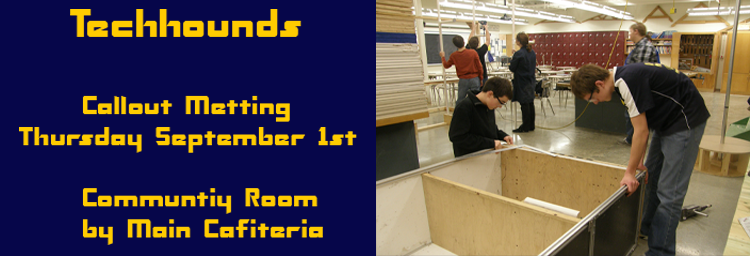
<style>
.page{position:relative;width:750px;height:256px;background:#06064a}
.page>*{position:absolute;margin:0}
.t1{font:25.6px "TransformersNormal";color:#ffcc00}
.t2{font:38.4px "TransformersNormal";color:#ffcc00}
</style>
<div class="page">
<p class="t1" style="left:19px;top:9px;width:338px;height:236px"><span class="t2">Techhounds<br><br></span>     Callout Metting<br>Thursday September 1st<br><br>     Communtiy Room <br>     by Main Cafiteria</p>
</div>
